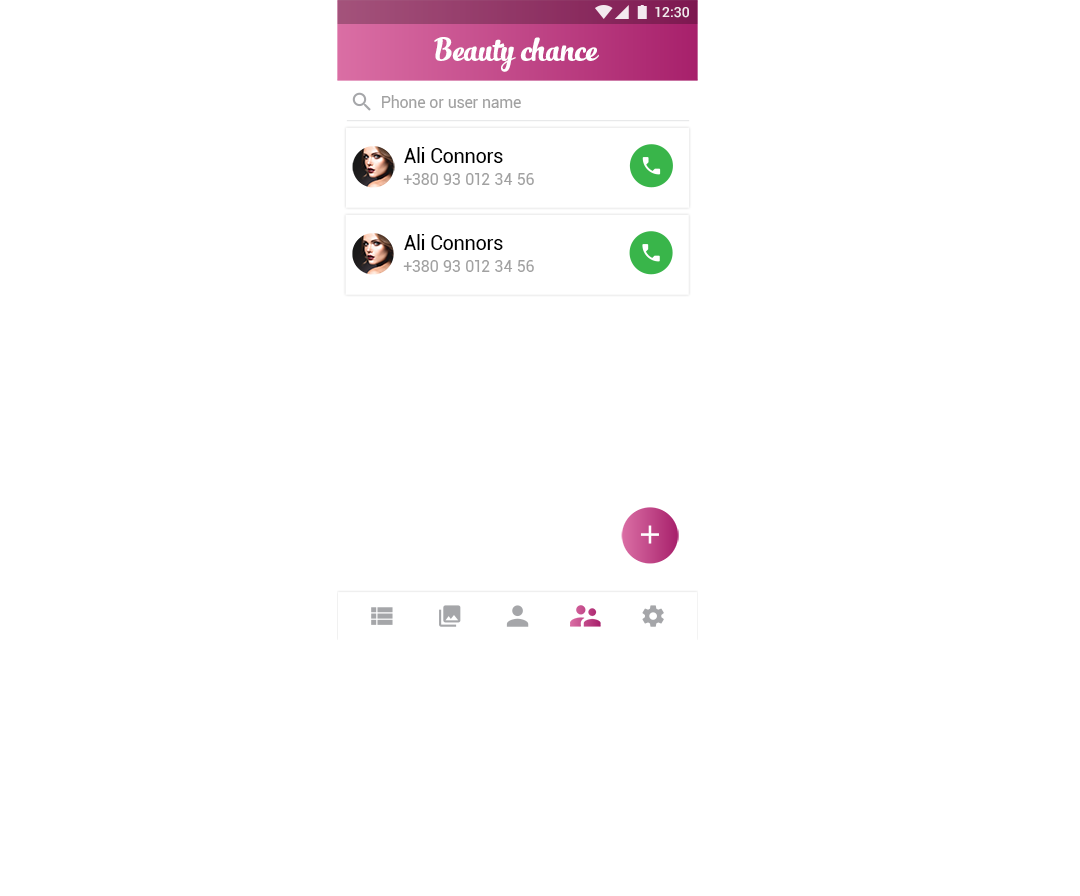
<style>
.page{position:relative;width:1080px;height:896px;background:#ffffff}
.page>*{position:absolute;margin:0}
.t1{font:14px "Roboto-Medium";color:#ffffff}
.t2{font:24px "SlimTony-Italic";color:#ffffff}
.t3{font:16px "Roboto-Regular";letter-spacing:-0.005em;color:#a1a1a1}
.t4{font:20px "Roboto-Regular";letter-spacing:-0.005em;color:#000000}
.t5{font:16px "Roboto-Regular";letter-spacing:0.01em;color:#a1a1a1}
</style>
<div class="page">
<p class="t1" style="left:655px;top:7px;width:34px;height:11px">12:30</p>
<p class="t2" style="left:434px;top:37px;width:165px;height:35px">Beauty chance</p>
<p class="t3" style="left:382px;top:95px;width:139px;height:13px">Phone or user name</p>
<p class="t4" style="left:404px;top:147px;width:99px;height:16px">Ali Connors</p>
<p class="t5" style="left:403px;top:173px;width:131px;height:12px">+380 93 012 34 56</p>
<p class="t4" style="left:404px;top:234px;width:99px;height:16px">Ali Connors</p>
<p class="t5" style="left:403px;top:260px;width:131px;height:12px">+380 93 012 34 56</p>
</div>
